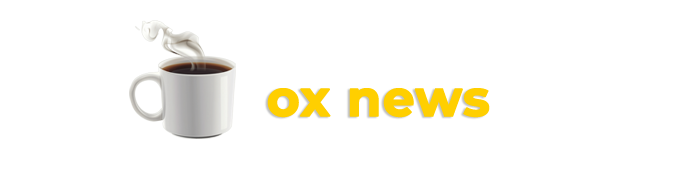
<style>
.page{position:relative;width:700px;height:175px;background:#ffffff}
.page>*{position:absolute;margin:0}
.t1{font:50px "Montserrat-Bold";color:#ffcf00;font-weight:bold}
</style>
<div class="page">
<p class="t1" style="left:267px;top:88px;width:223px;height:30px">ox news</p>
</div>
